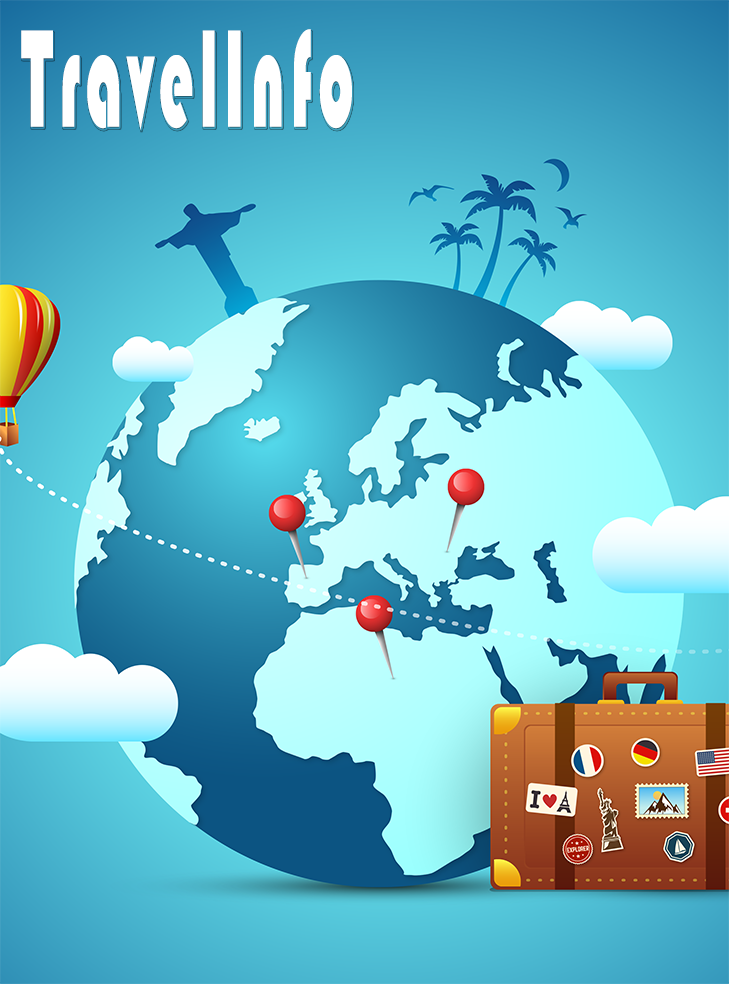
<style>
.page{position:relative;width:729px;height:984px}
.page>*{position:absolute;margin:0}
.t1{font:144px "Bauhaus93";letter-spacing:0.1em;color:#ffffff;scale:0.43 1}
</style>
<div class="page">
<p class="t1" style="left:21px;top:29px;width:331px;height:101px">TravelInfo</p>
</div>
